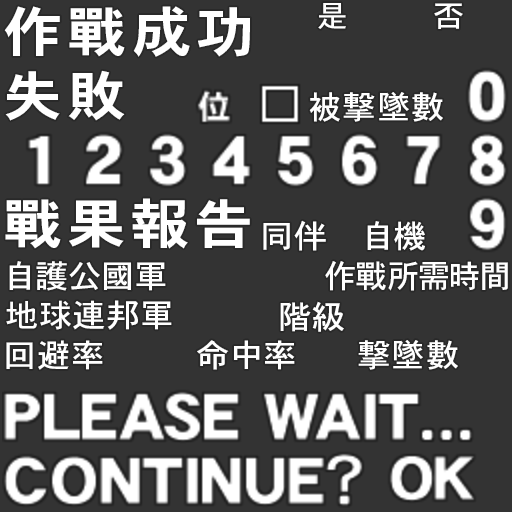
<style>
.page{position:relative;width:512px;height:512px;background:#333333}
.page>*{position:absolute;margin:0}
.t1{font:54px "HeiseiKakuGoStd-W7";letter-spacing:0.1em;color:#ffffff;scale:1.09 1}
.t2{font:30px "HeiseiKakuGoStd-W5";letter-spacing:0.06em;color:#ffffff;scale:1.04 1}
.t3{font:32px "HeiseiKakuGoStd-W5";letter-spacing:0.06em;color:#ffffff;scale:1.04 1}
.t4{font:32px "HeiseiKakuGoStd-W5";letter-spacing:0.04em;color:#ffffff;scale:1.04 1}
.t5{font:32px "HeiseiKakuGoStd-W5";color:#ffffff}
</style>
<div class="page">
<p class="t1" style="left:4px;top:6px;width:246px;height:51px">作戰成功</p>
<p class="t2" style="left:318px;top:3px;width:28px;height:26px">是</p>
<p class="t2" style="left:434px;top:3px;width:29px;height:26px">否</p>
<p class="t1" style="left:5px;top:70px;width:120px;height:51px">失敗</p>
<p class="t3" style="left:309px;top:92px;width:134px;height:30px">被撃墜數</p>
<p class="t1" style="left:5px;top:198px;width:245px;height:51px">戰果報告</p>
<p class="t3" style="left:263px;top:220px;width:63px;height:31px">同伴</p>
<p class="t3" style="left:367px;top:221px;width:58px;height:30px">自機</p>
<p class="t4" style="left:9px;top:261px;width:157px;height:30px">自護公國軍</p>
<p class="t5" style="left:325px;top:261px;width:183px;height:30px">作戰所需時間</p>
<p class="t4" style="left:6px;top:300px;width:166px;height:30px">地球連邦軍</p>
<p class="t3" style="left:280px;top:301px;width:64px;height:31px">階級</p>
<p class="t3" style="left:6px;top:340px;width:97px;height:30px">回避率</p>
<p class="t3" style="left:197px;top:340px;width:98px;height:30px">命中率</p>
<p class="t3" style="left:358px;top:340px;width:100px;height:30px">撃墜數</p>
</div>
